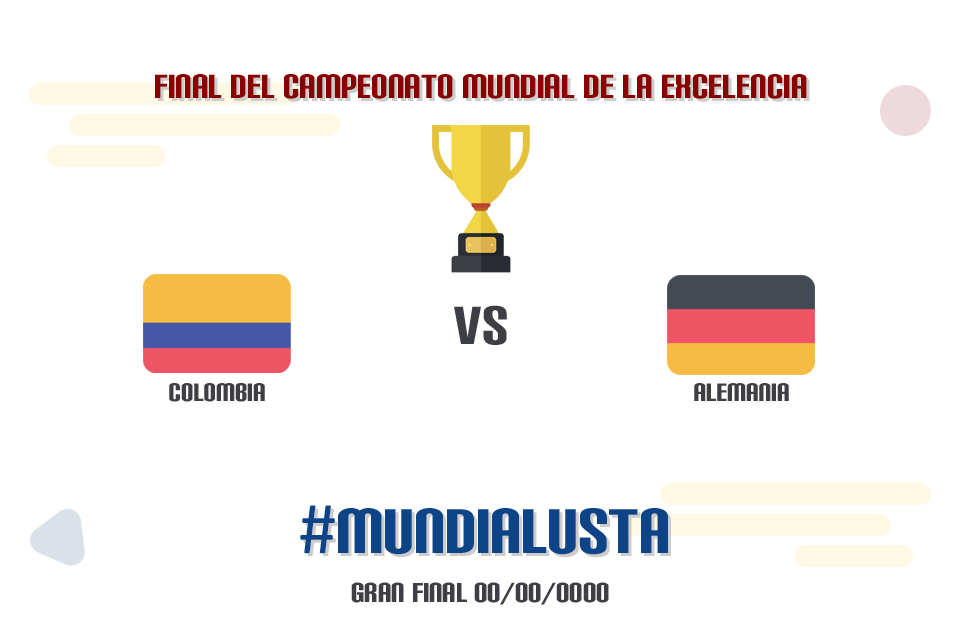
<style>
.page{position:relative;width:960px;height:642px;background:#ffffff}
.page>*{position:absolute;margin:0}
.t1{font:40px "CarbonBlock";color:#880300}
.t2{font:63.8px "CarbonBlock";color:#3e3f44}
.t3{font:30px "CarbonBlock";color:#3e3f44}
.t4{font:74.7px "CarbonBlock";color:#0c4487}
.t5{font:74.7px "Calibri";color:#0c4487}
.t6{font:32.6px "CarbonBlock";color:#3e3f44}
</style>
<div class="page">
<p class="t1" style="left:155px;top:74px;width:652px;height:25px">FINAL DEL CAMPEONATO MUNDIAL DE LA EXCELENCIA</p>
<p class="t2" style="left:454px;top:305px;width:53px;height:40px">VS</p>
<p class="t3" style="left:169px;top:383px;width:96px;height:19px">Colombia</p>
<p class="t3" style="left:694px;top:383px;width:95px;height:18px">ALEmania</p>
<p class="t4" style="left:300px;top:505px;width:368px;height:50px"><span class="t5">#</span>MUNDIALUSTA</p>
<p class="t6" style="left:351px;top:582px;width:258px;height:23px">GRAN FINAL 00/00/0000</p>
</div>
